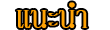
<style>
.page{position:relative;width:110px;height:30px;background:#ffffff}
.page>*{position:absolute;margin:0}
.t1{font:45px "KodchiangUPC";color:#fea305}
</style>
<div class="page">
<p class="t1" style="left:16px;top:2px;width:72px;height:26px">แนะนำ</p>
</div>
